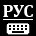
<style>
.page{position:relative;width:36px;height:36px;background:#000000}
.page>*{position:absolute;margin:0}
.t1{font:18px "Cambria-Bold";color:#ffffff}
</style>
<div class="page">
<p class="t1" style="left:3px;top:5px;width:30px;height:12px">РУС</p>
</div>
